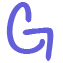
<style>
.page{position:relative;width:63px;height:63px;background:#ffffff}
.page>*{position:absolute;margin:0}
.t1{font:75px "Bareona";color:#635ed9}
</style>
<div class="page">
<p class="t1" style="left:6px;top:2px;width:48px;height:59px">G</p>
</div>
